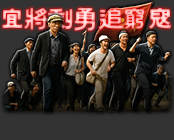
<style>
.page{position:relative;width:174px;height:140px;background:#333333}
.page>*{position:absolute;margin:0}
.t1{font:27.4px "FZZJ-MSHLFW";letter-spacing:-0.1em}
</style>
<div class="page">
<p class="t1" style="left:2px;top:7px;width:169px;height:24px">宜将剩勇追穷寇</p>
</div>
